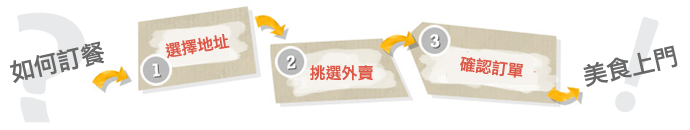
<style>
.page{position:relative;width:690px;height:130px;background:#ffffff}
.page>*{position:absolute;margin:0}
.t1{font:136.4px "LinusPlaySW";color:#e8e9ea}
.t2{font:24.1px "LiHeiPro";color:#686868}
.t3{font:16px "LiHeiPro";color:#dd5746}
</style>
<div class="page">
<p class="t1" style="left:16px;top:12px;width:70px;height:111px">?</p>
<p class="t2" style="left:9px;top:41px;width:95px;height:42px;rotate:-13deg">如何訂餐</p>
<p class="t3" style="left:165px;top:34px;width:65px;height:25px;rotate:-10deg">選擇地址</p>
<p class="t2" style="left:583px;top:45px;width:95px;height:42px;rotate:-13deg">美食上門</p>
<p class="t3" style="left:310px;top:65px;width:63px;height:16px">挑選外賣</p>
<p class="t3" style="left:460px;top:56px;width:63px;height:22px;rotate:7deg">確認訂單</p>
</div>
